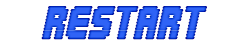
<style>
.page{position:relative;width:240px;height:48px;background:#ffffff}
.page>*{position:absolute;margin:0}
.t1{font:36px "Abduction";color:#2f63f6}
</style>
<div class="page">
<p class="t1" style="left:41px;top:6px;width:166px;height:34px">Restart</p>
</div>
